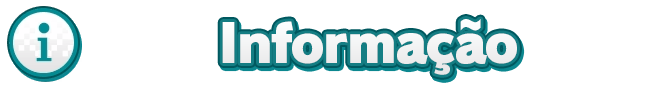
<style>
.page{position:relative;width:650px;height:88px;background:#ffffff}
.page>*{position:absolute;margin:0}
.t1{font:52px "RodinPro-UB";letter-spacing:-0.041em;color:#f2f2f3}
</style>
<div class="page">
<p class="t1" style="left:222px;top:19px;width:295px;height:56px">Informação</p>
</div>
